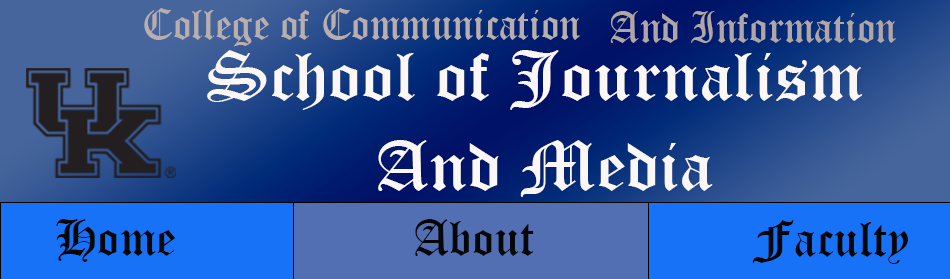
<style>
.page{position:relative;width:950px;height:279px}
.page>*{position:absolute;margin:0}
.t1{font:41.7px "OldEnglishTextMT";color:#b8aeae}
.t2{font:41.7px "OldEnglishTextMT";color:#b0a6a6}
.t3{font:67.5px "OldEnglishTextMT";color:#fcf7f7;scale:1.11 1}
.t4{font:50px "OldEnglishTextMT";color:#070707}
</style>
<div class="page">
<p class="t1" style="left:144px;top:8px;width:436px;height:39px">College of Communication</p>
<p class="t2" style="left:610px;top:11px;width:286px;height:32px">And Information</p>
<p class="t3" style="left:207px;top:50px;width:656px;height:147px;text-align:center">School of Journalism <br>And Media</p>
<p class="t4" style="left:56px;top:219px;width:120px;height:43px">Home</p>
<p class="t4" style="left:415px;top:219px;width:119px;height:37px">About</p>
<p class="t4" style="left:752px;top:220px;width:156px;height:44px">Faculty</p>
</div>
